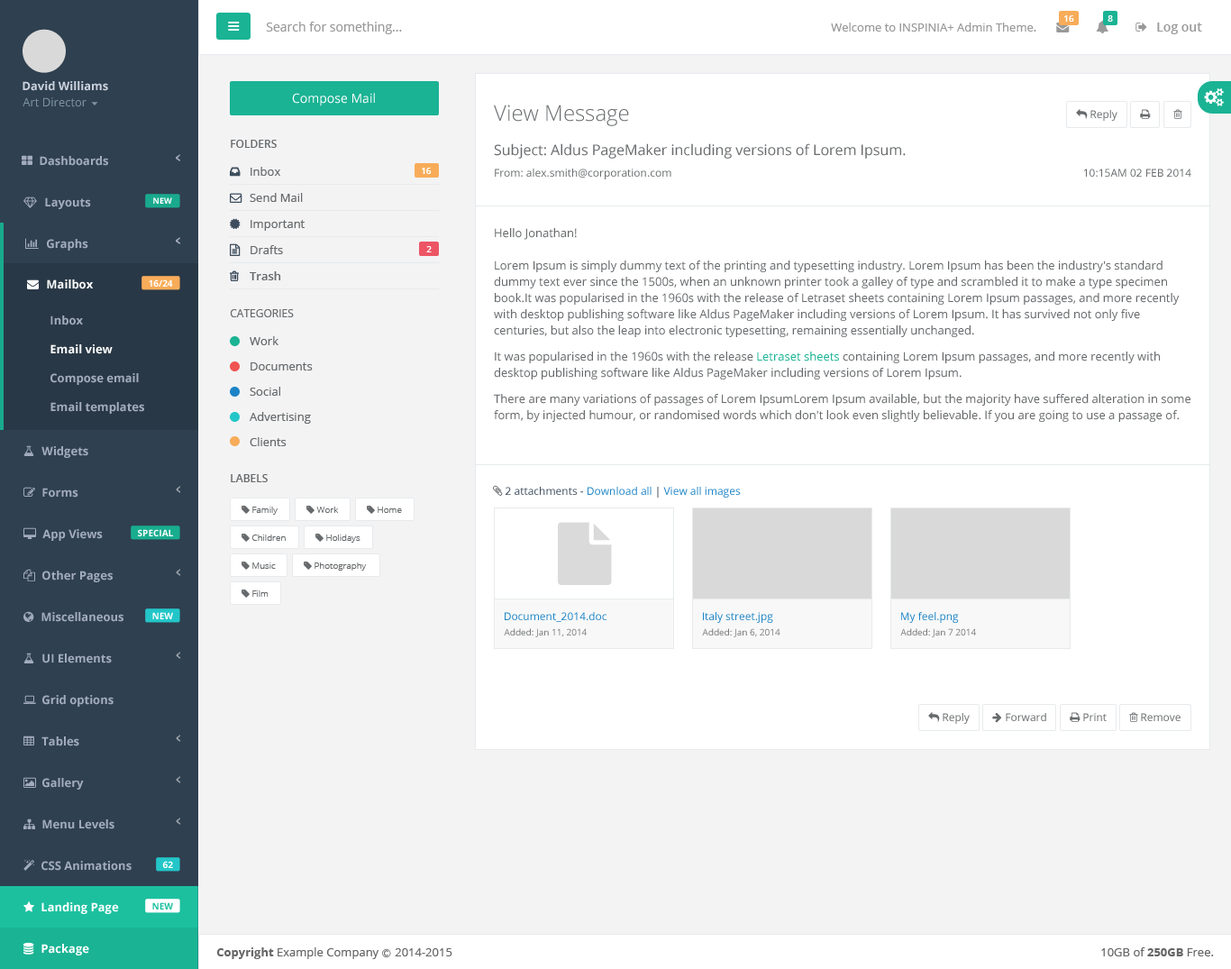
<style>
.page{position:relative;width:1231px;height:969px;background:#ffffff}
.page>*{position:absolute;margin:0}
.t1{font:9px "OpenSans-Semibold";color:#ffffff}
.t2{font:12.6px "OpenSans";color:#999999}
.t3{font:11.7px "OpenSans";color:#999999}
.t4{font:12.6px "OpenSans-Semibold";color:#999999}
.t5{font:11.7px "OpenSans-Bold";color:#cad1db}
.t6{font:11.7px "OpenSans";color:#7d93a5}
.t7{font:12.6px "OpenSans";color:#ffffff}
.t8{font:21.6px "OpenSans-Light";color:#676a6c}
.t9{font:10.8px "OpenSans";color:#676a6c}
.t10{font:10.8px "OpenSans-Semibold";color:#676a6c}
.t11{font:14.4px "OpenSans";color:#676a6c}
.t12{font:11.7px "OpenSans-Bold";color:#a2acbd}
.t13{font:11.7px "OpenSans";color:#676a6c}
.t14{font:8.1px "OpenSans-Bold";color:#fefefe}
.t15{font:11.7px/16.2px "OpenSans";color:#676a6c}
.t16{font:11.7px/16.2px "OpenSans";color:#1ab394}
.t17{font:11.7px "OpenSans-Bold";color:#ffffff}
.t18{font:9px "OpenSans-Bold";color:#fefefe}
.t19{font:11.7px "OpenSans-Semibold";color:#676a6c}
.t20{font:10.8px "OpenSans";color:#3d4d5d}
.t21{font:10.8px "OpenSans";color:#1c84c6}
.t22{font:9px "OpenSans-Light";color:#676a6c}
.t23{font:9px "OpenSans";color:#787a7c}
.t24{font:9px "OpenSans-Bold";color:#1cc09f}
.t25{font:11.7px "OpenSans";color:#666666}
.t26{font:11.7px "OpenSans-Bold";color:#666666}
.t27{font:9px "Meiryo";color:#666666}
</style>
<div class="page">
<p class="t1" style="left:1064px;top:15px;width:10px;height:7px">16</p>
<p class="t1" style="left:1107px;top:15px;width:6px;height:7px">8</p>
<p class="t2" style="left:266px;top:22px;width:136px;height:12px">Search for something...</p>
<p class="t3" style="left:831px;top:23px;width:205px;height:9px">Welcome to INSPINIA+ Admin Theme.</p>
<p class="t4" style="left:1157px;top:23px;width:45px;height:11px">Log out</p>
<p class="t5" style="left:23px;top:81px;width:85px;height:10px">David Williams</p>
<p class="t6" style="left:23px;top:97px;width:64px;height:10px">Art Director</p>
<p class="t7" style="left:292px;top:93px;width:83px;height:13px">Compose Mail</p>
<p class="t8" style="left:494px;top:105px;width:135px;height:21px">View Message</p>
<p class="t9" style="left:1090px;top:110px;width:27px;height:11px">Reply</p>
<p class="t10" style="left:231px;top:140px;width:46px;height:8px">FOLDERS</p>
<p class="t11" style="left:494px;top:143px;width:412px;height:16px">Subject: Aldus PageMaker including versions of Lorem Ipsum.</p>
<p class="t12" style="left:40px;top:156px;width:68px;height:10px">Dashboards</p>
<p class="t13" style="left:251px;top:167px;width:29px;height:9px">Inbox</p>
<p class="t1" style="left:422px;top:168px;width:10px;height:6px">16</p>
<p class="t9" style="left:495px;top:169px;width:176px;height:10px">From: alex.smith@corporation.com</p>
<p class="t9" style="left:1084px;top:169px;width:107px;height:8px">10:15AM 02 FEB 2014</p>
<p class="t12" style="left:45px;top:197px;width:46px;height:12px">Layouts</p>
<p class="t14" style="left:153px;top:197px;width:19px;height:7px">NEW</p>
<p class="t13" style="left:250px;top:193px;width:53px;height:9px">Send Mail</p>
<p class="t13" style="left:251px;top:220px;width:54px;height:11px">Important</p>
<p class="t15" style="left:494px;top:228px;width:696px;height:194px">Hello Jonathan! <br><br>Lorem Ipsum is simply dummy text of the printing and typesetting industry. Lorem Ipsum has been the industry's standard dummy text ever since the 1500s, when an unknown printer took a galley of type and scrambled it to make a type specimen book.It was popularised in the 1960s with the release of Letraset sheets containing Lorem Ipsum passages, and more recently with desktop publishing software like Aldus PageMaker including versions of Lorem Ipsum. It has survived not only five centuries, but also the leap into electronic typesetting, remaining essentially unchanged.<br><br>It was popularised in the 1960s with the release <span class="t16">Letraset sheets</span> containing Lorem Ipsum passages, and more recently with desktop publishing software like Aldus PageMaker including versions of Lorem Ipsum.<br><br>There are many variations of passages of Lorem IpsumLorem Ipsum available, but the majority have suffered alteration in some form, by injected humour, or randomised words which don't look even slightly believable. If you are going to use a passage of.</p>
<p class="t12" style="left:47px;top:239px;width:41px;height:12px">Graphs</p>
<p class="t13" style="left:251px;top:245px;width:32px;height:9px">Drafts</p>
<p class="t1" style="left:426px;top:246px;width:6px;height:6px">2</p>
<p class="t17" style="left:47px;top:279px;width:46px;height:10px">Mailbox</p>
<p class="t18" style="left:149px;top:279px;width:24px;height:8px">16/24</p>
<p class="t19" style="left:250px;top:271px;width:31px;height:9px">Trash</p>
<p class="t12" style="left:50px;top:315px;width:33px;height:10px">Inbox</p>
<p class="t9" style="left:230px;top:309px;width:64px;height:8px">CATEGORIES</p>
<p class="t13" style="left:250px;top:336px;width:28px;height:9px">Work</p>
<p class="t17" style="left:50px;top:344px;width:63px;height:10px">Email view</p>
<p class="t13" style="left:251px;top:362px;width:62px;height:8px">Documents</p>
<p class="t12" style="left:50px;top:373px;width:89px;height:12px">Compose email</p>
<p class="t13" style="left:250px;top:387px;width:30px;height:9px">Social</p>
<p class="t12" style="left:50px;top:402px;width:94px;height:12px">Email templates</p>
<p class="t13" style="left:250px;top:412px;width:61px;height:12px">Advertising</p>
<p class="t13" style="left:250px;top:437px;width:37px;height:9px">Clients</p>
<p class="t12" style="left:41px;top:446px;width:47px;height:12px">Widgets</p>
<p class="t10" style="left:231px;top:474px;width:37px;height:8px">LABELS</p>
<p class="t12" style="left:42px;top:488px;width:36px;height:9px">Forms</p>
<p class="t20" style="left:506px;top:487px;width:235px;height:10px">2 attachments - <span class="t21">Download all</span> | <span class="t21">View all images</span></p>
<p class="t22" style="left:252px;top:506px;width:26px;height:9px">Family</p>
<p class="t22" style="left:316px;top:506px;width:23px;height:7px">Work</p>
<p class="t22" style="left:378px;top:506px;width:24px;height:7px">Home</p>
<p class="t12" style="left:42px;top:529px;width:61px;height:12px">App Views</p>
<p class="t18" style="left:138px;top:529px;width:35px;height:7px">SPECIAL</p>
<p class="t22" style="left:252px;top:534px;width:34px;height:7px">Children</p>
<p class="t22" style="left:326px;top:534px;width:34px;height:8px">Holidays</p>
<p class="t22" style="left:252px;top:562px;width:24px;height:7px">Music</p>
<p class="t22" style="left:314px;top:562px;width:53px;height:8px">Photography</p>
<p class="t12" style="left:42px;top:570px;width:71px;height:12px">Other Pages</p>
<p class="t22" style="left:252px;top:590px;width:17px;height:7px">Film</p>
<p class="t12" style="left:41px;top:612px;width:82px;height:10px">Miscellaneous</p>
<p class="t18" style="left:152px;top:612px;width:21px;height:7px">NEW</p>
<p class="t21" style="left:505px;top:612px;width:101px;height:10px">Document_2014.doc</p>
<p class="t21" style="left:703px;top:612px;width:70px;height:11px">Italy street.jpg</p>
<p class="t21" style="left:901px;top:612px;width:58px;height:11px">My feel.png</p>
<p class="t23" style="left:504px;top:628px;width:83px;height:9px">Added: Jan 11, 2014</p>
<p class="t23" style="left:702px;top:628px;width:78px;height:9px">Added: Jan 6, 2014</p>
<p class="t23" style="left:900px;top:628px;width:76px;height:9px">Added: Jan 7 2014</p>
<p class="t12" style="left:42px;top:653px;width:70px;height:10px">UI Elements</p>
<p class="t12" style="left:42px;top:695px;width:72px;height:11px">Grid options</p>
<p class="t9" style="left:943px;top:713px;width:27px;height:11px">Reply</p>
<p class="t9" style="left:1006px;top:713px;width:40px;height:8px">Forward</p>
<p class="t9" style="left:1083px;top:713px;width:24px;height:8px">Print</p>
<p class="t9" style="left:1141px;top:713px;width:39px;height:8px">Remove</p>
<p class="t12" style="left:41px;top:736px;width:38px;height:10px">Tables</p>
<p class="t12" style="left:42px;top:778px;width:42px;height:11px">Gallery</p>
<p class="t12" style="left:42px;top:819px;width:72px;height:10px">Menu Levels</p>
<p class="t12" style="left:41px;top:861px;width:91px;height:9px">CSS Animations</p>
<p class="t18" style="left:162px;top:861px;width:11px;height:7px">62</p>
<p class="t17" style="left:41px;top:902px;width:78px;height:12px">Landing Page</p>
<p class="t24" style="left:152px;top:902px;width:21px;height:7px">NEW</p>
<p class="t17" style="left:41px;top:943px;width:48px;height:12px">Package</p>
<p class="t25" style="left:216px;top:947px;width:236px;height:12px"><span class="t26">Copyright</span> Example Company <span class="t27">Ⓒ </span>2014-2015</p>
<p class="t25" style="left:1101px;top:947px;width:113px;height:9px">10GB of <span class="t26">250GB</span> Free.</p>
</div>
